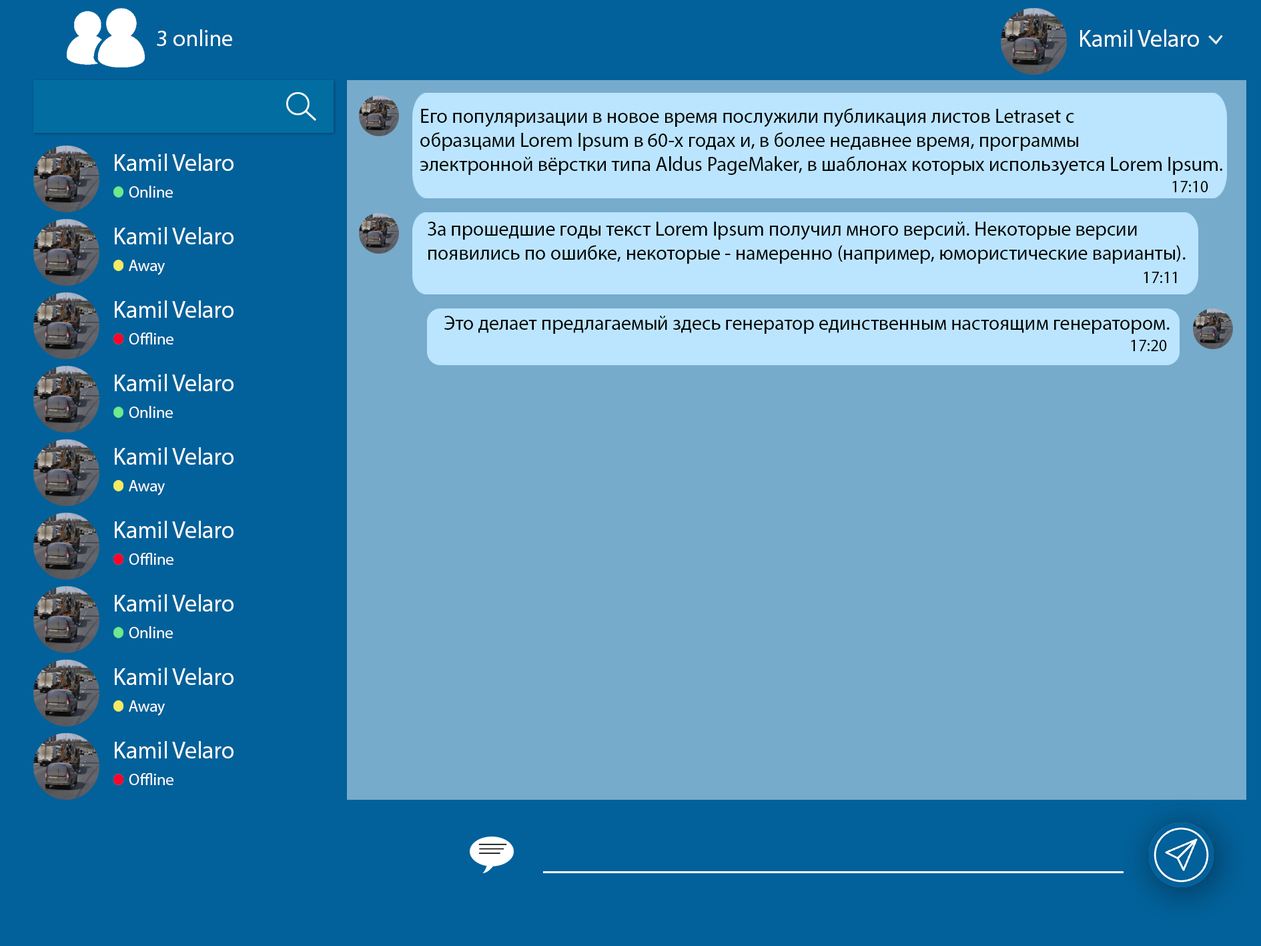
<style>
.page{position:relative;width:1261px;height:946px;background:#02619a}
.page>*{position:absolute;margin:0}
.t1{font:22.9px "MyriadPro-Regular";color:#ffffff}
.t2{font:5.8px "MyriadPro-Regular";color:#ffffff}
.t3{font:20px "MyriadPro-Regular";color:#020202}
.t4{font:16.7px "MyriadPro-Regular";color:#ffffff}
.t5{font:16.7px "MyriadPro-Regular";color:#020202}
</style>
<div class="page">
<p class="t1" style="left:157px;top:29px;width:75px;height:17px">3 online</p>
<p class="t2" style="left:1080px;top:29px;width:119px;height:18px">Kamil Velaro</p>
<p class="t3" style="left:420px;top:108px;width:802px;height:67px">Его популяризации в новое время послужили публикация листов Letraset с <br>образцами Lorem Ipsum в 60-х годах и, в более недавнее время, программы <br>электронной вёрстки типа Aldus PageMaker, в шаблонах которых используется Lorem Ipsum.</p>
<p class="t2" style="left:115px;top:153px;width:119px;height:18px">Kamil Velaro</p>
<p class="t4" style="left:129px;top:186px;width:44px;height:12px">Online</p>
<p class="t5" style="left:1172px;top:181px;width:36px;height:11px">17:10</p>
<p class="t3" style="left:428px;top:222px;width:758px;height:42px">За прошедшие годы текст Lorem Ipsum получил много версий. Некоторые версии <br>появились по ошибке, некоторые - намеренно (например, юмористические варианты).</p>
<p class="t2" style="left:115px;top:227px;width:119px;height:17px">Kamil Velaro</p>
<p class="t4" style="left:129px;top:260px;width:36px;height:15px">Away</p>
<p class="t5" style="left:1144px;top:272px;width:33px;height:11px">17:11</p>
<p class="t2" style="left:115px;top:300px;width:119px;height:18px">Kamil Velaro</p>
<p class="t3" style="left:444px;top:316px;width:726px;height:18px">Это делает предлагаемый здесь генератор единственным настоящим генератором.</p>
<p class="t4" style="left:129px;top:332px;width:44px;height:12px">Offline</p>
<p class="t5" style="left:1131px;top:340px;width:36px;height:11px">17:20</p>
<p class="t2" style="left:115px;top:374px;width:119px;height:17px">Kamil Velaro</p>
<p class="t4" style="left:129px;top:406px;width:44px;height:12px">Online</p>
<p class="t2" style="left:115px;top:447px;width:119px;height:17px">Kamil Velaro</p>
<p class="t4" style="left:129px;top:480px;width:36px;height:15px">Away</p>
<p class="t2" style="left:115px;top:520px;width:119px;height:18px">Kamil Velaro</p>
<p class="t4" style="left:129px;top:552px;width:44px;height:13px">Offline</p>
<p class="t2" style="left:115px;top:594px;width:119px;height:17px">Kamil Velaro</p>
<p class="t4" style="left:129px;top:626px;width:44px;height:12px">Online</p>
<p class="t2" style="left:115px;top:667px;width:119px;height:18px">Kamil Velaro</p>
<p class="t4" style="left:129px;top:700px;width:36px;height:15px">Away</p>
<p class="t2" style="left:115px;top:741px;width:119px;height:17px">Kamil Velaro</p>
<p class="t4" style="left:129px;top:773px;width:44px;height:12px">Offline</p>
</div>
